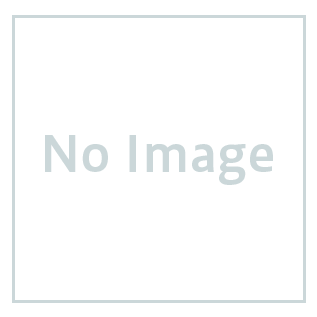
<style>
.page{position:relative;width:317px;height:317px;background:#ffffff}
.page>*{position:absolute;margin:0}
.t1{font:48.6px "HiraginoUDSansStdN-W6";color:#cbd7d9}
</style>
<div class="page">
<p class="t1" style="left:45px;top:135px;width:228px;height:50px">No Image</p>
</div>
